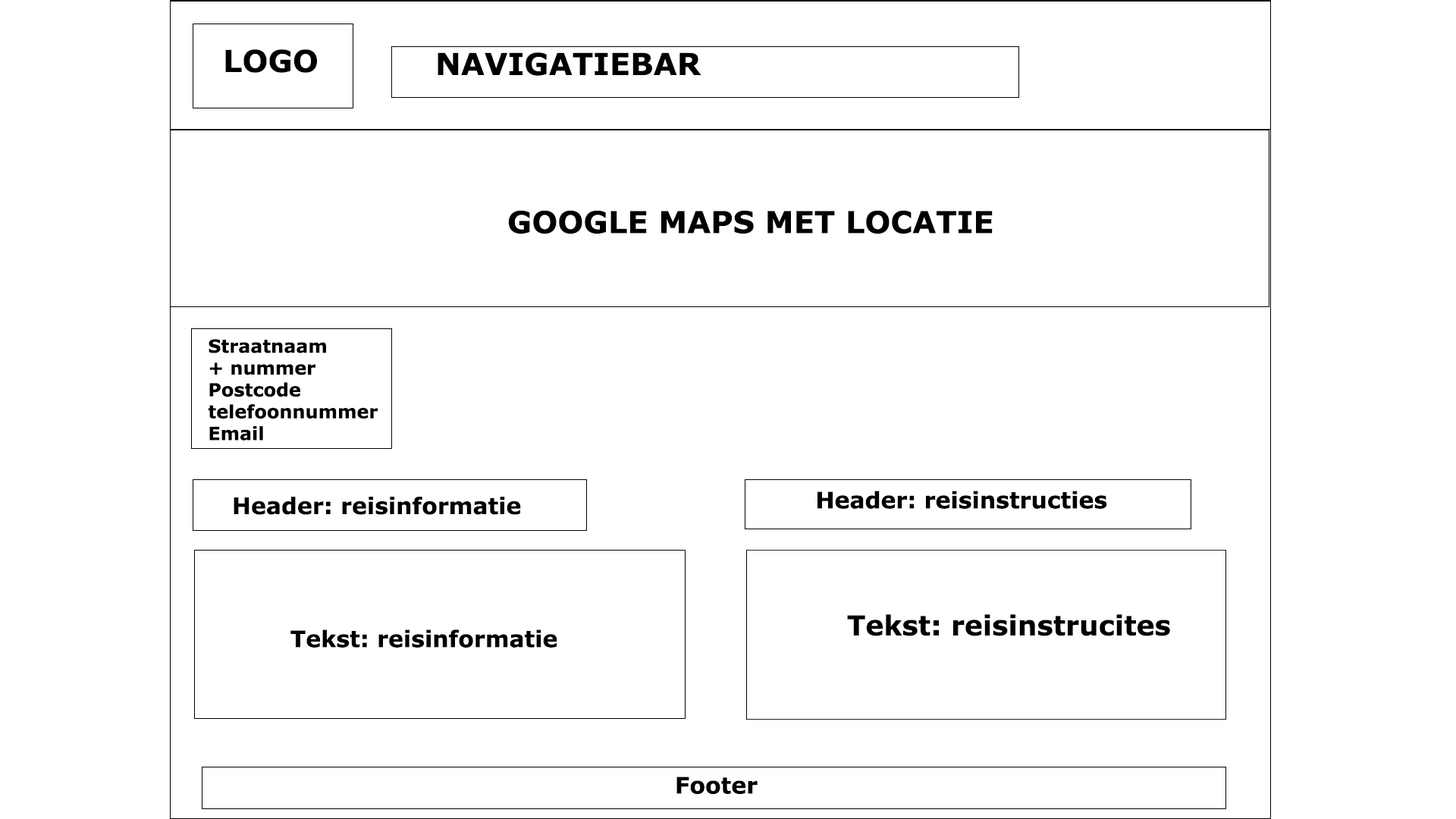
<style>
.page{position:relative;width:1456px;height:819px;background:#ffffff}
.page>*{position:absolute;margin:0}
.t1{font:30.3px "Verdana-Bold";color:#000000}
.t2{font:18.2px "Verdana-Bold";color:#000000}
.t3{font:22.7px "Verdana-Bold";color:#000000}
.t4{font:27.3px "Verdana-Bold";color:#000000}
</style>
<div class="page">
<p class="t1" style="left:225px;top:49px;width:92px;height:24px">LOGO</p>
<p class="t1" style="left:438px;top:52px;width:263px;height:24px">NAVIGATIEBAR</p>
<p class="t1" style="left:508px;top:210px;width:485px;height:24px">GOOGLE MAPS MET LOCATIE</p>
<p class="t2" style="left:208px;top:339px;width:170px;height:102px">Straatnaam <br>+ nummer<br>Postcode<br>telefoonnummer<br>Email</p>
<p class="t3" style="left:234px;top:497px;width:287px;height:18px">Header: reisinformatie</p>
<p class="t3" style="left:817px;top:491px;width:290px;height:18px">Header: reisinstructies</p>
<p class="t4" style="left:847px;top:614px;width:323px;height:22px">Tekst: reisinstrucites</p>
<p class="t3" style="left:290px;top:629px;width:267px;height:19px">Tekst: reisinformatie</p>
<p class="t3" style="left:676px;top:777px;width:82px;height:18px">Footer</p>
</div>
